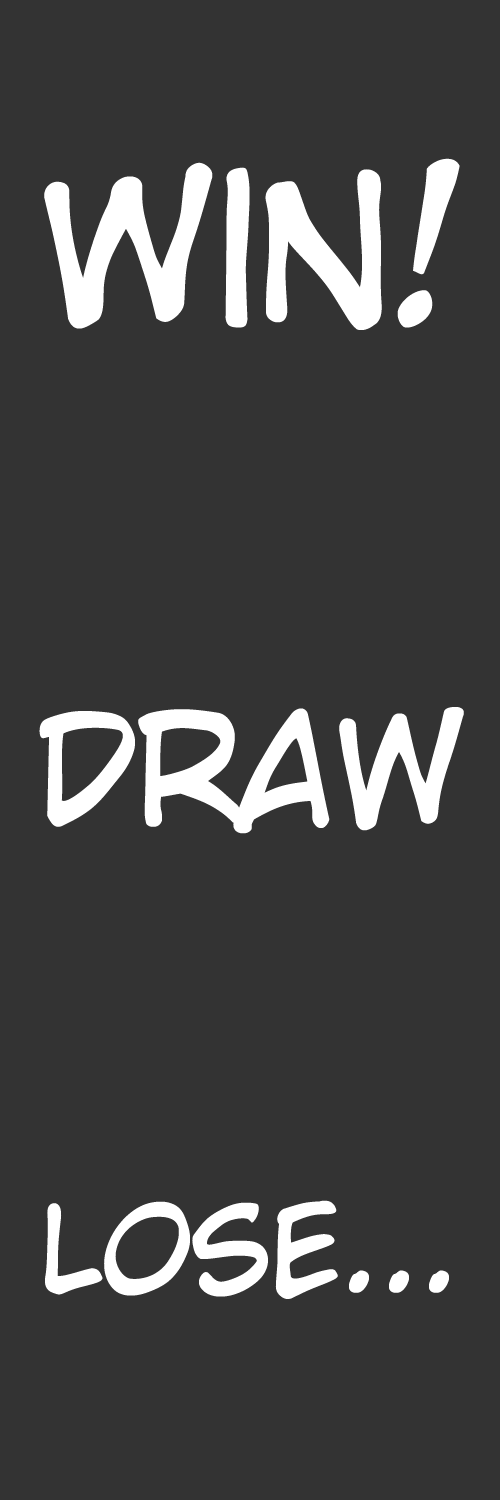
<style>
.page{position:relative;width:500px;height:1500px;background:#333333}
.page>*{position:absolute;margin:0}
.t1{font:199.6px "CCWildWordsRoman";letter-spacing:-0.02em;color:#ffffff}
.t2{font:150px "CCWildWordsRoman";letter-spacing:-0.02em;color:#ffffff}
.t3{font:120px "CCWildWordsRoman";letter-spacing:-0.02em;color:#ffffff}
</style>
<div class="page">
<p class="t1" style="left:44px;top:158px;width:416px;height:172px">Win!</p>
<p class="t2" style="left:39px;top:707px;width:425px;height:127px">Draw</p>
<p class="t3" style="left:45px;top:1200px;width:404px;height:99px">lose...</p>
</div>
